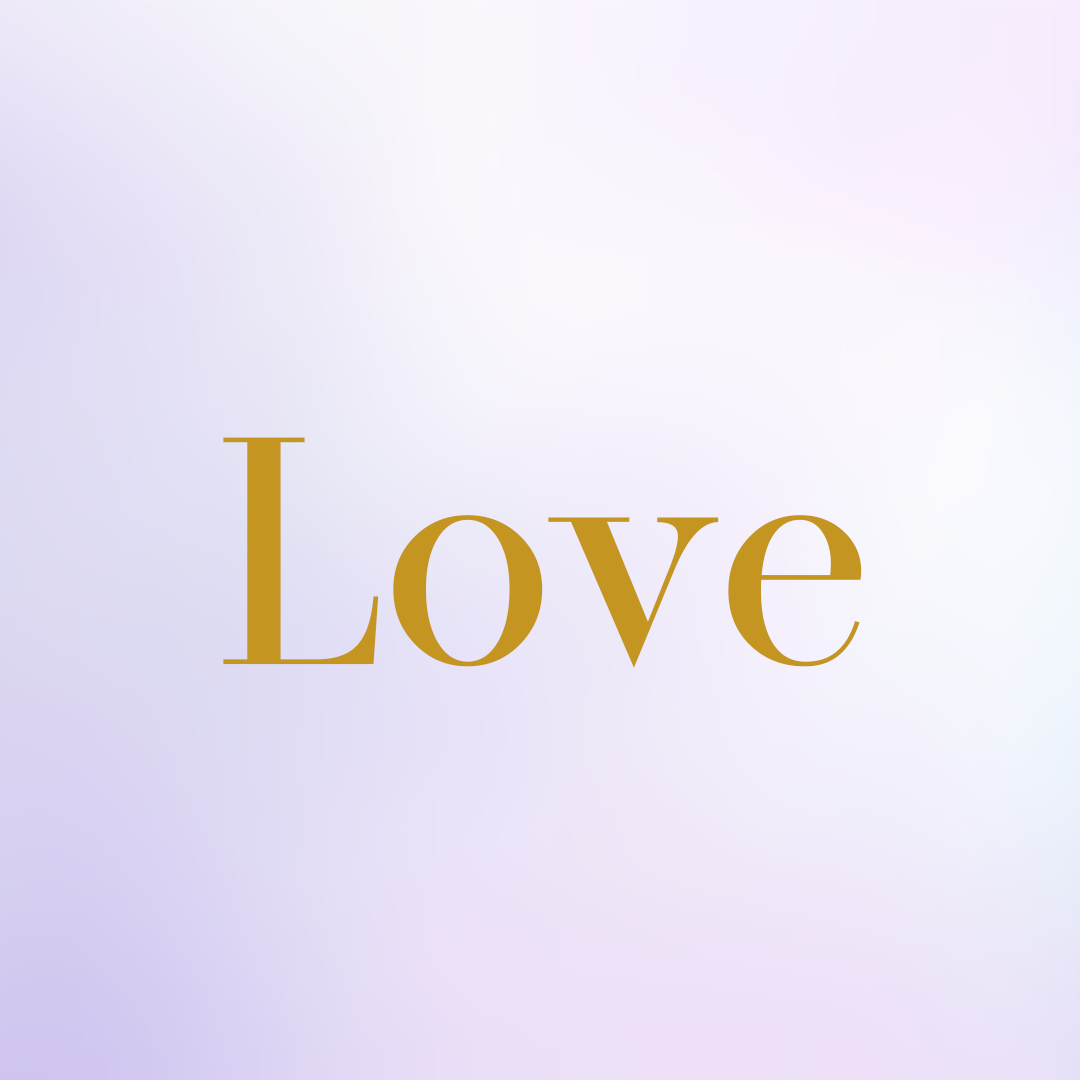
<style>
.page{position:relative;width:1080px;height:1080px}
.page>*{position:absolute;margin:0}
.t1{font:333.3px "Balerno-Bd";letter-spacing:0.02em;color:#c59521}
</style>
<div class="page">
<p class="t1" style="left:223px;top:437px;width:639px;height:231px">Love</p>
</div>
